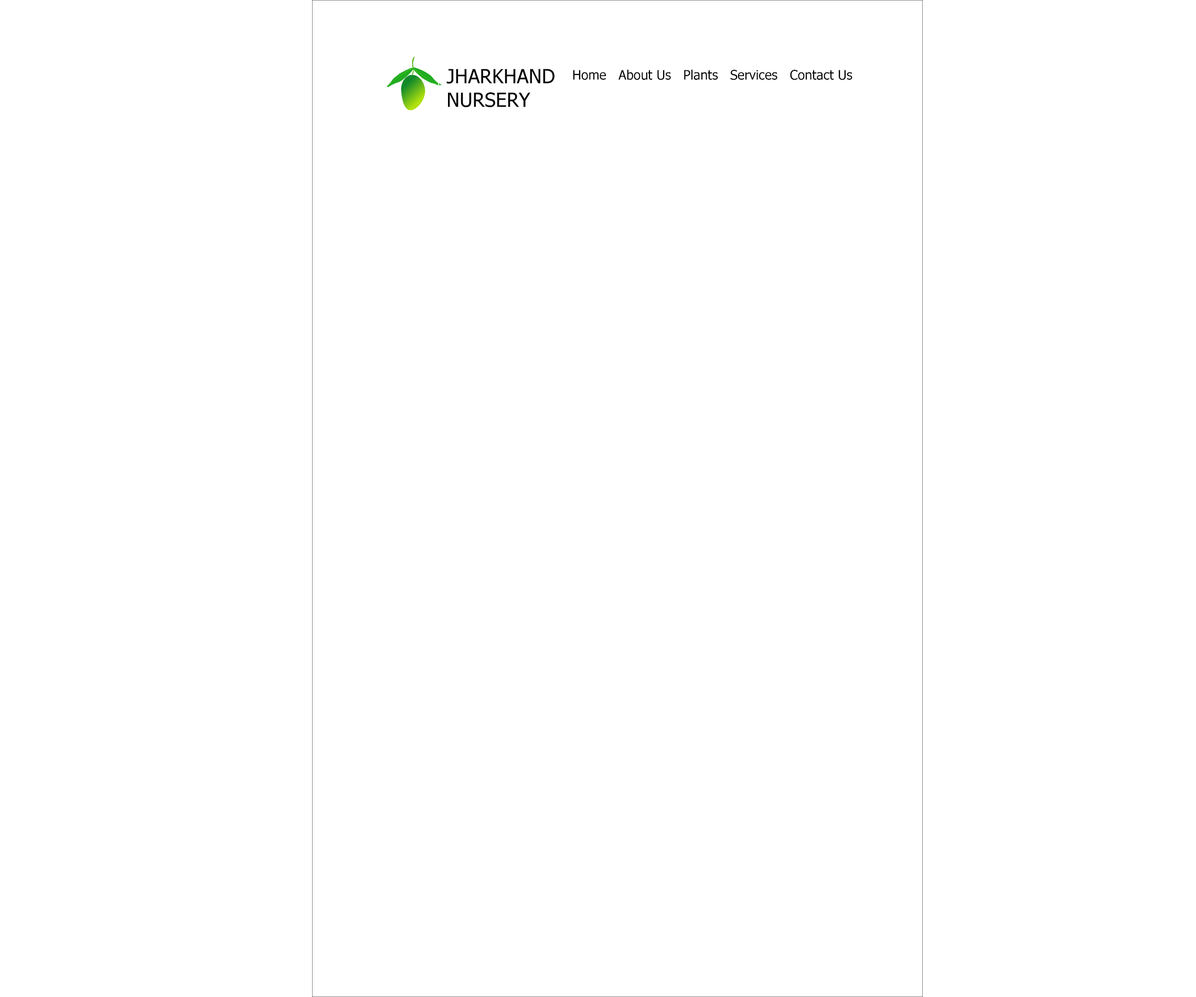
<style>
.page{position:relative;width:1196px;height:997px;background:#ffffff}
.page>*{position:absolute;margin:0}
.t1{font:19.7px "Tahoma";color:#030303}
.t2{font:13.1px "Tahoma";color:#030303}
</style>
<div class="page">
<p class="t1" style="left:446px;top:69px;width:109px;height:39px">JHARKHAND <br>NURSERY</p>
<p class="t2" style="left:573px;top:69px;width:280px;height:11px">Home   About Us   Plants   Services   Contact Us</p>
</div>
